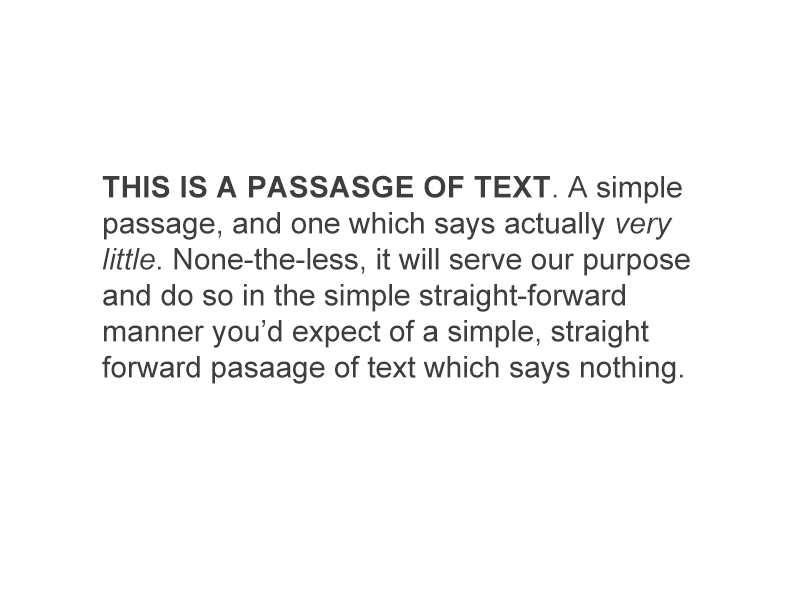
<style>
.page{position:relative;width:800px;height:600px;background:#ffffff}
.page>*{position:absolute;margin:0}
.t1{font:30px "ArialMT";color:#3e3e3e}
.t2{font:30px "Arial-BoldMT";letter-spacing:0.005em;color:#3e3e3e;text-transform:uppercase}
.t3{font:30px "Arial-ItalicMT";color:#3e3e3e}
</style>
<div class="page">
<p class="t1" style="left:102px;top:175px;width:588px;height:209px"><span class="t2">This is a passasge of text</span>. A simple passage, and one which says actually <span class="t3">very little</span>. None-the-less, it will serve our purpose and do so in the simple straight-forward manner you’d expect of a simple, straight forward pasaage of text which says nothing.</p>
</div>
